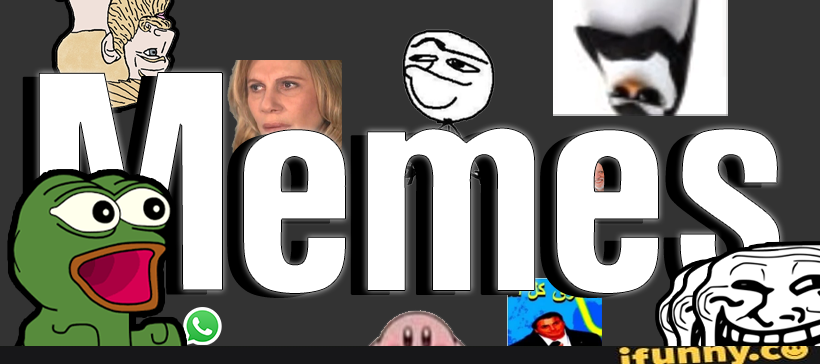
<style>
.page{position:relative;width:820px;height:364px;background:#ffffff}
.page>*{position:absolute;margin:0}
.t1{font:271.8px "OPTIAkrogroteskBold-Cond";letter-spacing:-0.06em;color:#ffffff;font-weight:bold}
</style>
<div class="page">
<p class="t1" style="left:38px;top:72px;width:743px;height:222px">Memes</p>
</div>
